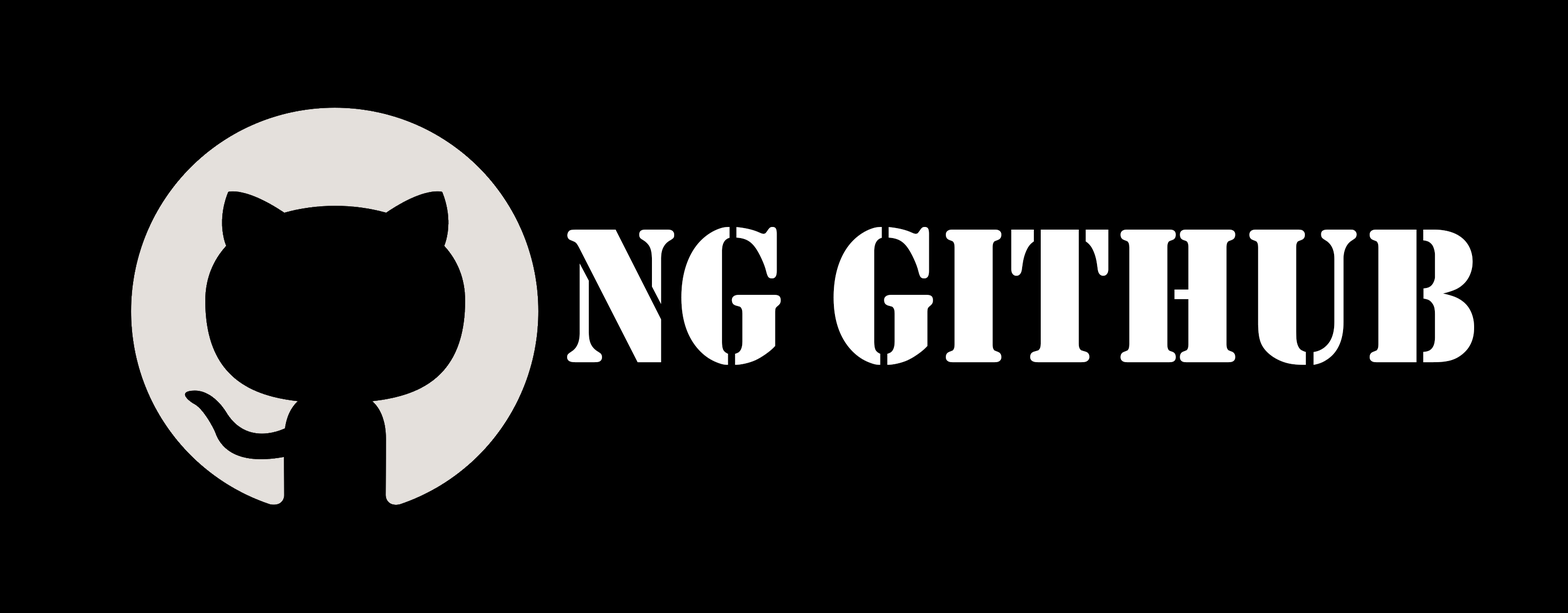
<style>
.page{position:relative;width:1568px;height:613px;background:#000000}
.page>*{position:absolute;margin:0}
.t1{font:198.9px "Stencil";color:#ffffff;scale:0.88 1}
</style>
<div class="page">
<p class="t1" style="left:567px;top:227px;width:907px;height:138px">NG GITHUB</p>
</div>
